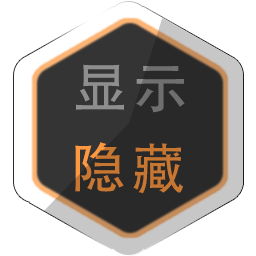
<style>
.page{position:relative;width:256px;height:256px;background:#ffffff}
.page>*{position:absolute;margin:0}
.t1{font:54.6px "AdobeHeitiStd-Regular";letter-spacing:0.1em}
.t2{font:54.6px "AdobeHeitiStd-Regular";letter-spacing:0.1em;color:#c77732}
</style>
<div class="page">
<p class="t1" style="left:76px;top:64px;width:109px;height:49px">显示</p>
<p class="t2" style="left:75px;top:142px;width:108px;height:52px">隐藏</p>
</div>
